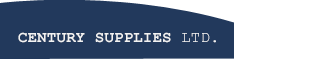
<style>
.page{position:relative;width:314px;height:61px;background:#22395c}
.page>*{position:absolute;margin:0}
.t1{font:16px "CourierNewPS-BoldMT";color:#f2f2f2}
.t2{font:16px "CourierNewPSMT";color:#f2f2f2}
</style>
<div class="page">
<p class="t1" style="left:18px;top:32px;width:198px;height:11px">CENTURY SUPPLIES<span class="t2"> LTD.</span></p>
</div>
